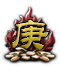
<style>
.page{position:relative;width:60px;height:68px;background:#ffffff}
.page>*{position:absolute;margin:0}
.t1{font:42.1px "STLiti"}
</style>
<div class="page">
<p class="t1" style="left:11px;top:20px;width:38px;height:30px">庚</p>
</div>
